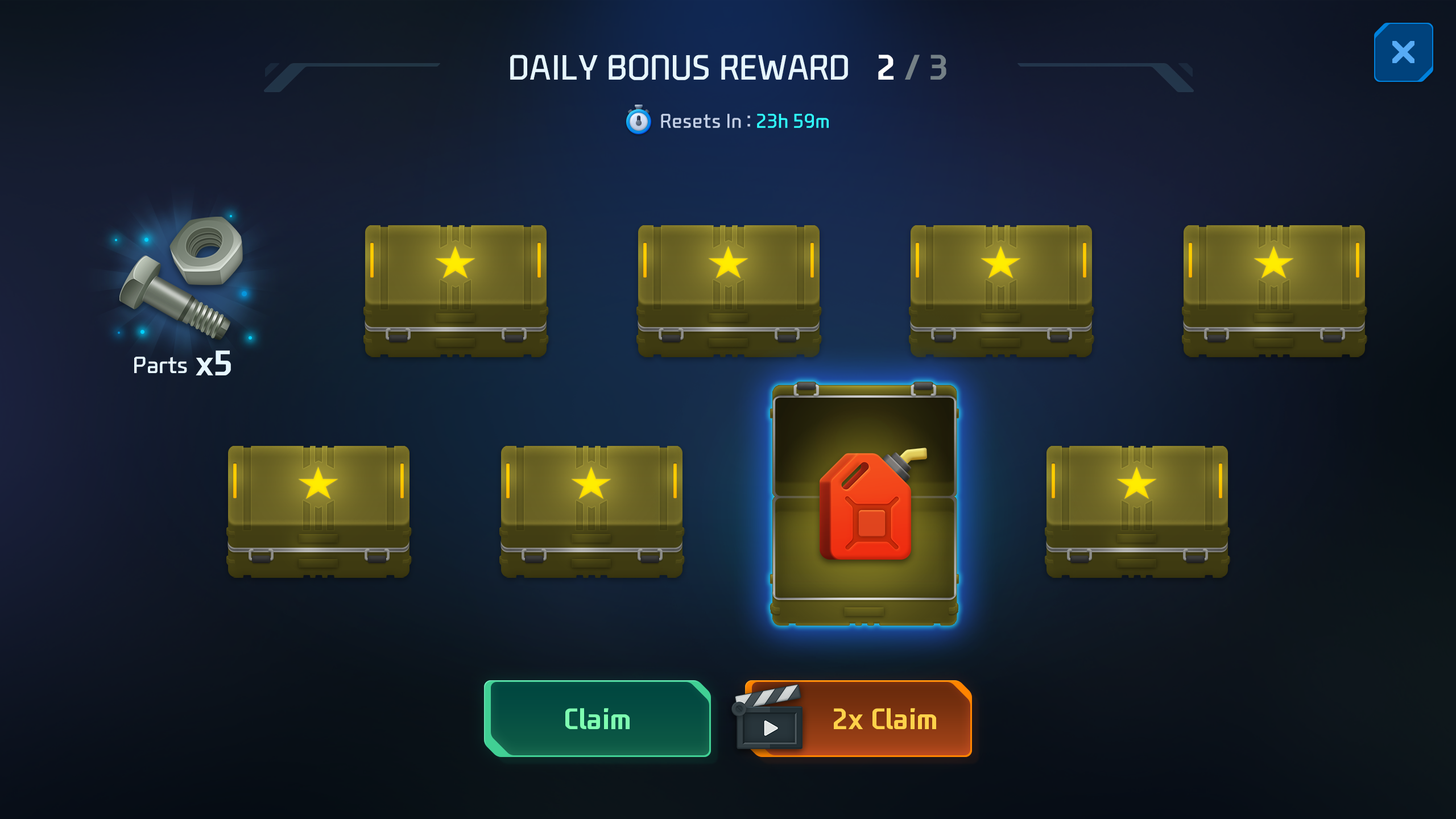
<style>
.page{position:relative;width:1456px;height:819px}
.page>*{position:absolute;margin:0}
.t1{font:34.1px "NEXONFootballGothicL";color:#e6f6ff;text-transform:uppercase}
.t2{font:34.1px "NEXONFootballGothicB";color:#ffffff;text-transform:uppercase}
.t3{font:34.1px "NEXONFootballGothicB";color:#748086;text-transform:uppercase}
.t4{font:19.3px "NEXONFootballGothicL";letter-spacing:-0.01em;color:#c3d0e7}
.t5{font:19.3px "NEXONFootballGothicL";letter-spacing:-0.01em;color:#30fdff}
.t6{font:34.1px "NEXONFootballGothicB";color:#e6f6ff}
.t7{font:22.7px "NEXONFootballGothicL";color:#e6f6ff}
.t8{font:28.4px "NEXONFootballGothicB";color:#7effb1}
.t9{font:28.4px "NEXONFootballGothicB";color:#ffd24a}
</style>
<div class="page">
<p class="t1" style="left:510px;top:55px;width:436px;height:25px">Daily Bonus Reward   <span class="t2">2</span><span class="t3"> / 3</span></p>
<p class="t4" style="left:661px;top:114px;width:168px;height:14px">Resets In : <span class="t5">23h 59m</span></p>
<p class="t6" style="left:196px;top:350px;width:35px;height:25px">x5</p>
<p class="t7" style="left:134px;top:357px;width:53px;height:16px">Parts</p>
<p class="t8" style="left:565px;top:708px;width:65px;height:21px">Claim</p>
<p class="t9" style="left:834px;top:708px;width:102px;height:21px">2x Claim</p>
</div>
